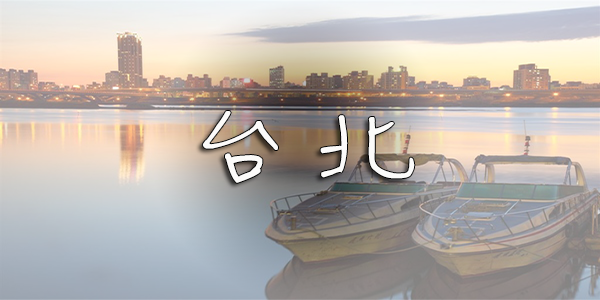
<style>
.page{position:relative;width:600px;height:300px}
.page>*{position:absolute;margin:0}
.t1{font:120px "DFHsiu-W3-WIN-BF";color:#fcfbfa;scale:1.06 1}
</style>
<div class="page">
<p class="t1" style="left:202px;top:111px;width:213px;height:72px">台北</p>
</div>
